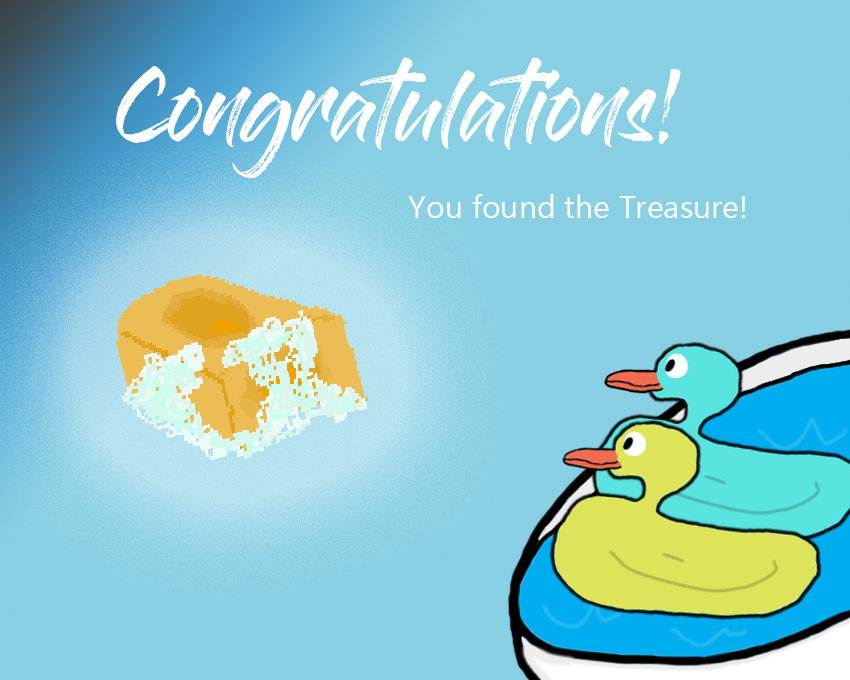
<style>
.page{position:relative;width:850px;height:680px}
.page>*{position:absolute;margin:0}
.t1{font:32px "Ebrima";color:#ffffff}
.t2{font:72px "GlossAndBloom";color:#ffffff}
</style>
<div class="page">
<p class="t1" style="left:116px;top:57px;width:630px;height:161px;text-align:center"><span class="t2">Congratulations!<br><br></span>You found the Treasure!</p>
</div>
